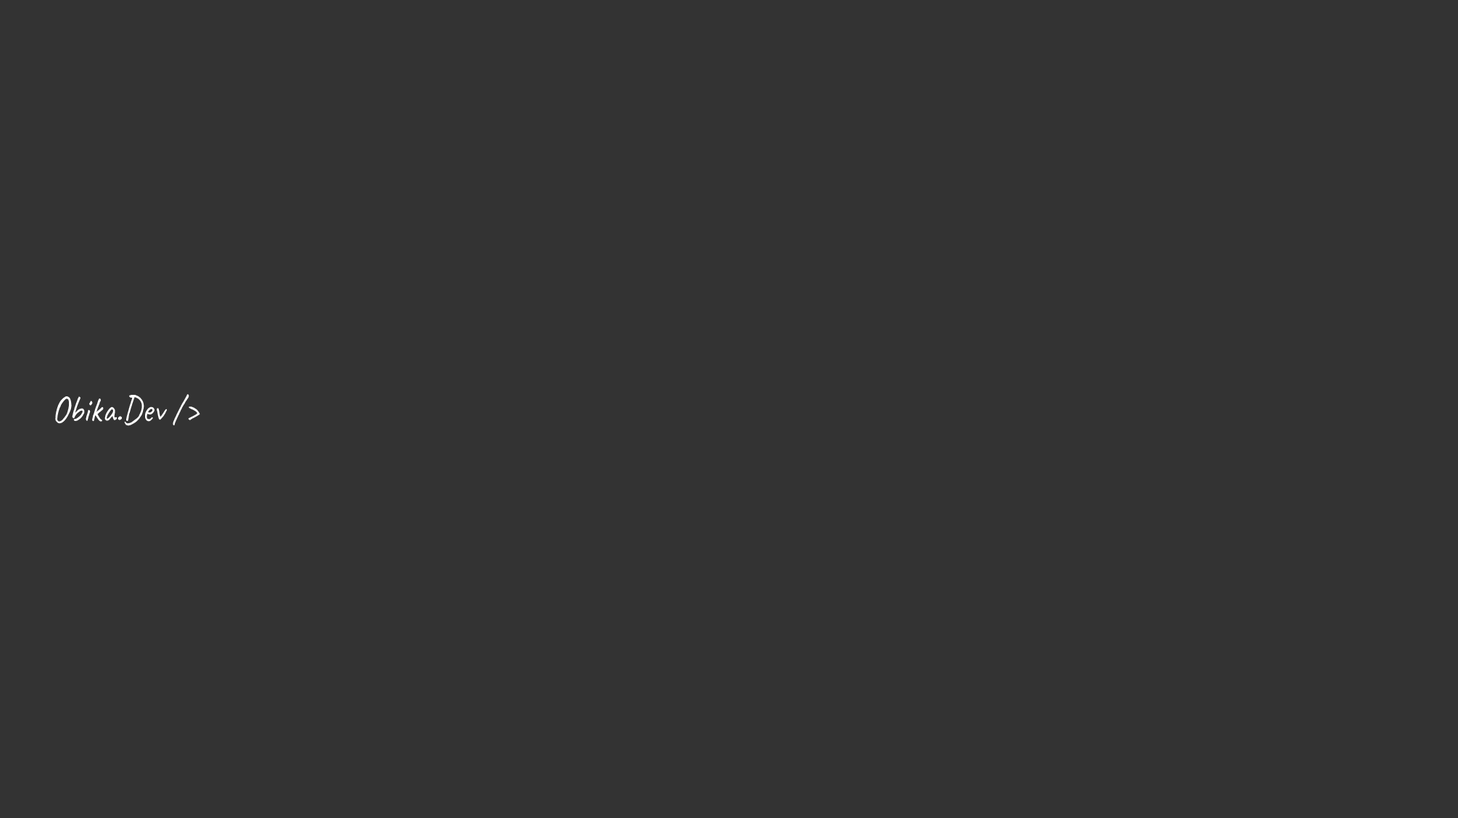
<style>
.page{position:relative;width:1458px;height:818px;background:#333333}
.page>*{position:absolute;margin:0}
.t1{font:38.3px "Caveat-Regular";color:#ffffff;scale:0.88 1}
</style>
<div class="page">
<p class="t1" style="left:55px;top:394px;width:145px;height:32px">Obika.Dev /&gt;</p>
</div>
